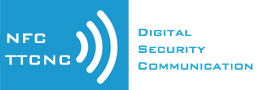
<style>
.page{position:relative;width:260px;height:90px;background:#ffffff}
.page>*{position:absolute;margin:0}
.t1{font:14px "BankGothicBT-Medium";color:#21a9db}
.t2{font:18px "BankGothicBT-Medium";color:#ffffff}
</style>
<div class="page">
<p class="t1" style="left:138px;top:28px;width:115px;height:42px">Digital<br>Security<br>Communication</p>
<p class="t2" style="left:5px;top:33px;width:65px;height:32px">NFC<br>TTCNC</p>
</div>
